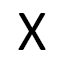
<style>
.page{position:relative;width:64px;height:64px;background:#ffffff}
.page>*{position:absolute;margin:0}
.t1{font:58.3px "Calibri";color:#000000}
</style>
<div class="page">
<p class="t1" style="left:18px;top:13px;width:28px;height:37px">Х</p>
</div>
